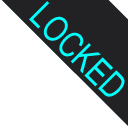
<style>
.page{position:relative;width:128px;height:128px;background:#ffffff}
.page>*{position:absolute;margin:0}
.t1{font:36px "ArialMT";color:#00fffc;scale:0.8 1}
</style>
<div class="page">
<p class="t1" style="left:29px;top:1px;width:96px;height:96px;rotate:45deg">LOCKED</p>
</div>
